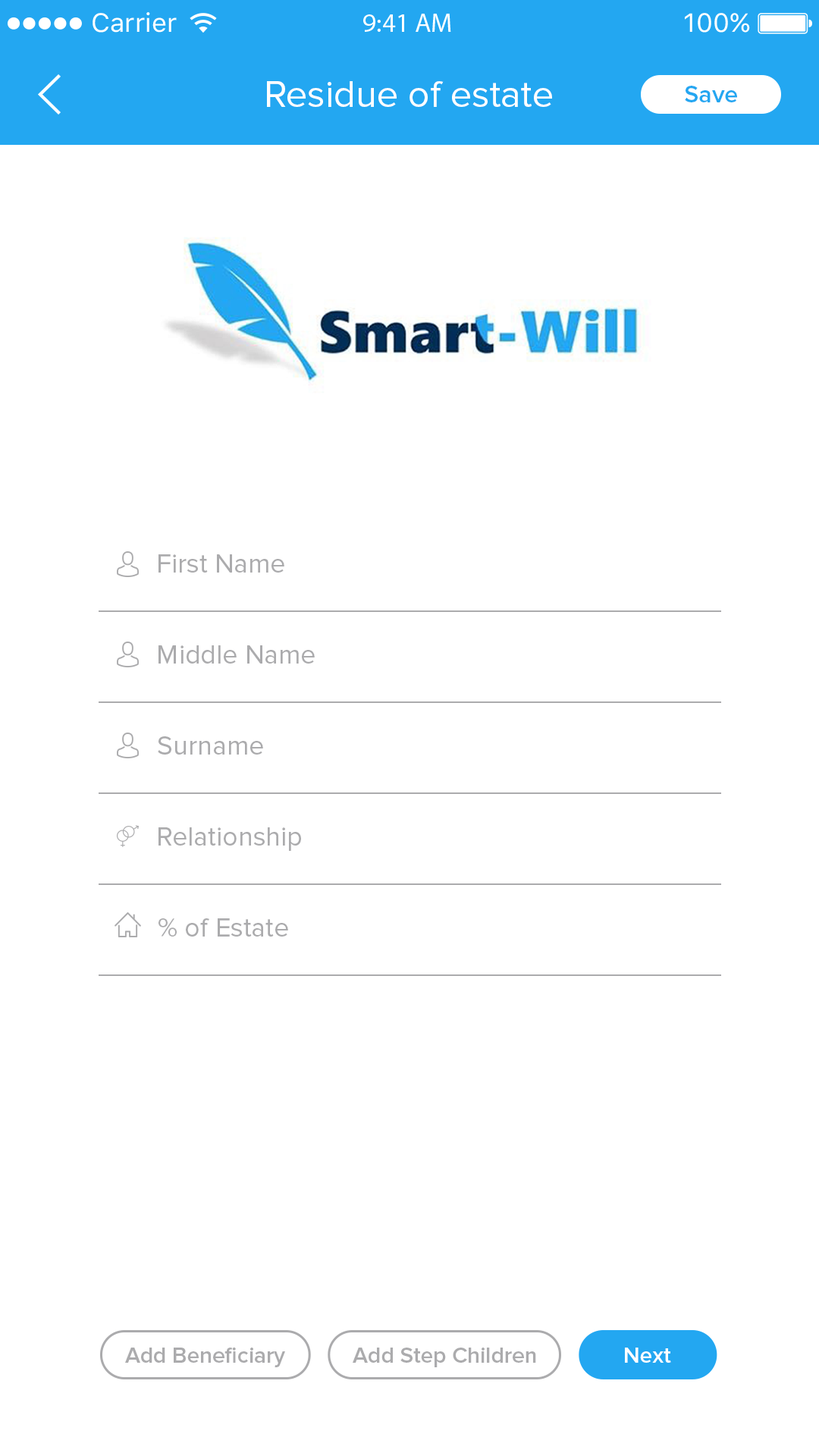
<style>
.page{position:relative;width:819px;height:1456px;background:#ffffff}
.page>*{position:absolute;margin:0}
.t1{font:38.1px "ProximaNova-Regular";color:#ffffff}
.t2{font:24.7px "ProximaNova-Semibold";color:#23a7f1}
.t3{font:27.3px "ProximaNova-Regular";color:#ababad}
.t4{font:22.7px "ProximaNova-Semibold";color:#ababad}
.t5{font:22.7px "ProximaNova-Semibold";color:#ffffff}
</style>
<div class="page">
<p class="t1" style="left:267px;top:81px;width:285px;height:26px">Residue of estate</p>
<p class="t2" style="left:685px;top:86px;width:52px;height:16px">Save</p>
<p class="t3" style="left:158px;top:554px;width:126px;height:19px">First Name</p>
<p class="t3" style="left:158px;top:645px;width:157px;height:19px">Middle Name</p>
<p class="t3" style="left:158px;top:736px;width:105px;height:19px">Surname</p>
<p class="t3" style="left:158px;top:827px;width:143px;height:24px">Relationship</p>
<p class="t3" style="left:158px;top:918px;width:130px;height:19px">% of Estate</p>
<p class="t4" style="left:125px;top:1347px;width:160px;height:20px">Add Beneficiary</p>
<p class="t4" style="left:353px;top:1348px;width:183px;height:19px">Add Step Children</p>
<p class="t5" style="left:625px;top:1348px;width:46px;height:15px">Next</p>
</div>
